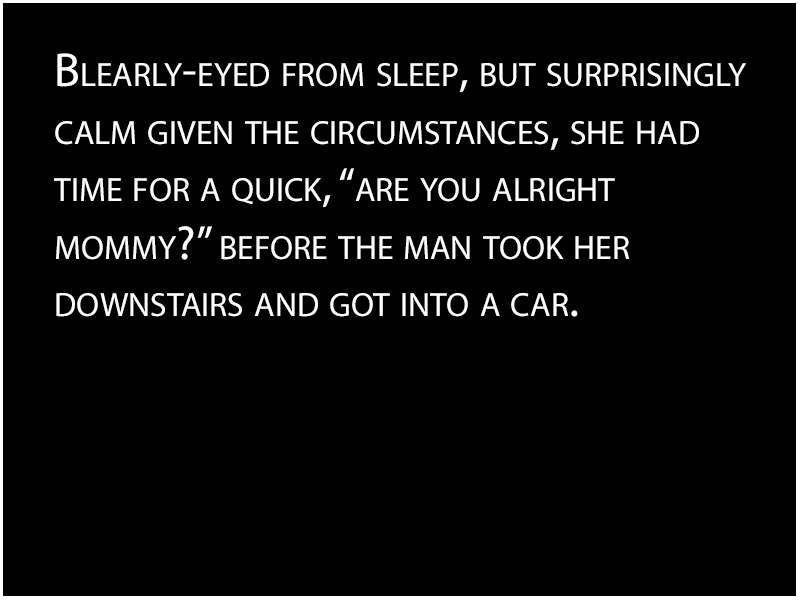
<style>
.page{position:relative;width:800px;height:600px;background:#000000}
.page>*{position:absolute;margin:0}
.t1{font:48px "MyriadPro-Regular";color:#ffffff;font-variant:small-caps}
</style>
<div class="page">
<p class="t1" style="left:54px;top:53px;width:692px;height:264px">Blearly-eyed from sleep, but surprisingly <br>calm given the circumstances, she had <br>time for a quick, “are you alright <br>mommy?” before the man took her <br>downstairs and got into a car.</p>
</div>
